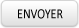
<style>
.page{position:relative;width:79px;height:28px}
.page>*{position:absolute;margin:0}
.t1{font:14px "Calibri";color:#000000;scale:0.85 1}
</style>
<div class="page">
<p class="t1" style="left:18px;top:9px;width:45px;height:10px">ENVOYER</p>
</div>
